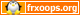
<style>
.page{position:relative;width:80px;height:15px;background:#fe7200}
.page>*{position:absolute;margin:0}
.t1{font:9px "Verdana-Bold";letter-spacing:-0.025em;color:#ffffff;scale:0.9 1}
</style>
<div class="page">
<p class="t1" style="left:27px;top:4px;width:50px;height:9px">frxoops.org</p>
</div>
